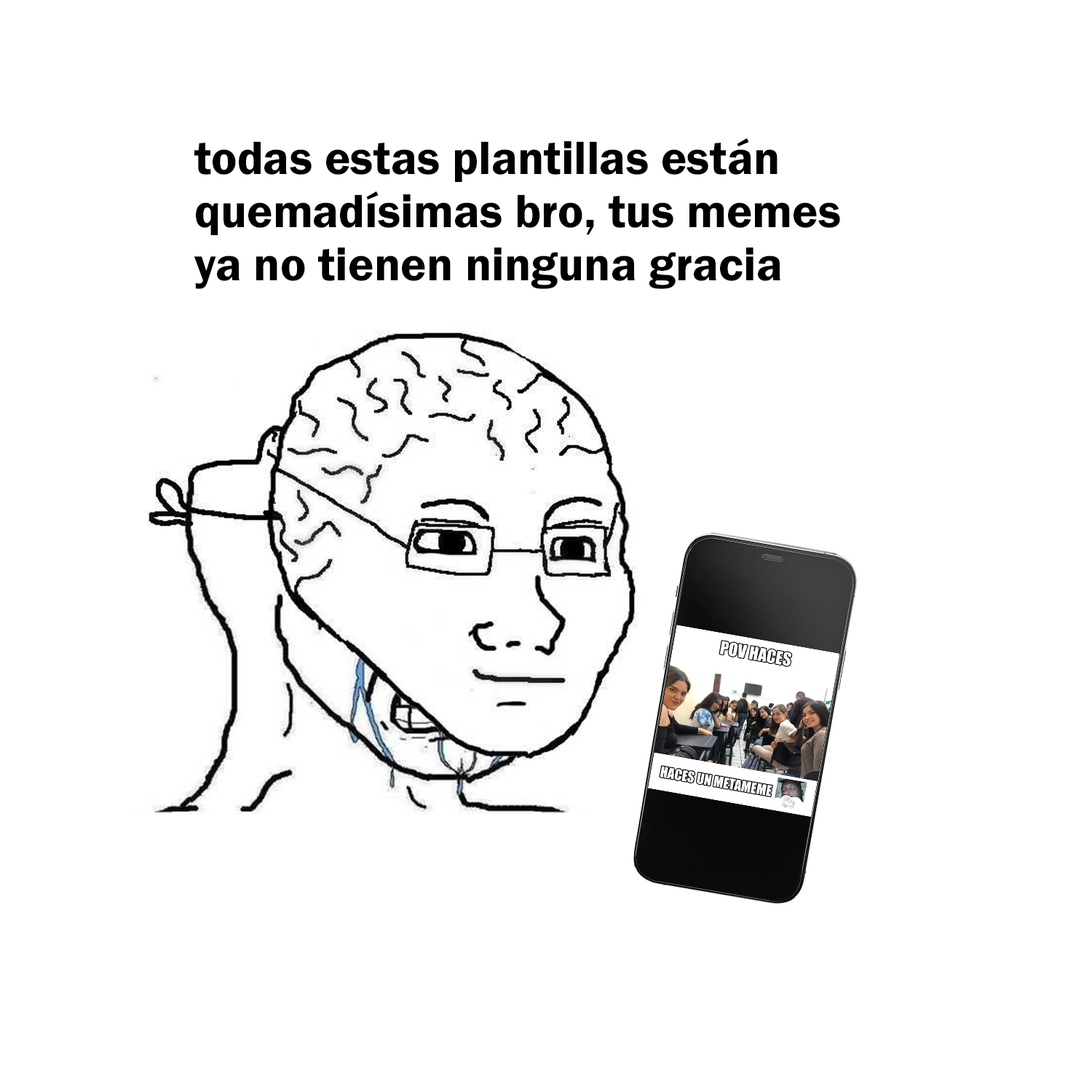
<style>
.page{position:relative;width:1092px;height:1092px;background:#ffffff}
.page>*{position:absolute;margin:0}
.t1{font:48.4px "FranklinGothic-Demi";color:#000000}
</style>
<div class="page">
<p class="t1" style="left:194px;top:138px;width:646px;height:151px">todas estas plantillas están<br>quemadísimas bro, tus memes<br>ya no tienen ninguna gracia</p>
</div>
